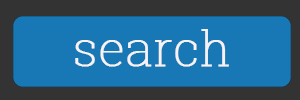
<style>
.page{position:relative;width:300px;height:100px;background:#1878b6}
.page>*{position:absolute;margin:0}
.t1{font:48px "RobotoSlab-Thin";color:#f7f3f4;font-weight:bold}
</style>
<div class="page">
<p class="t1" style="left:75px;top:29px;width:154px;height:38px">search</p>
</div>
